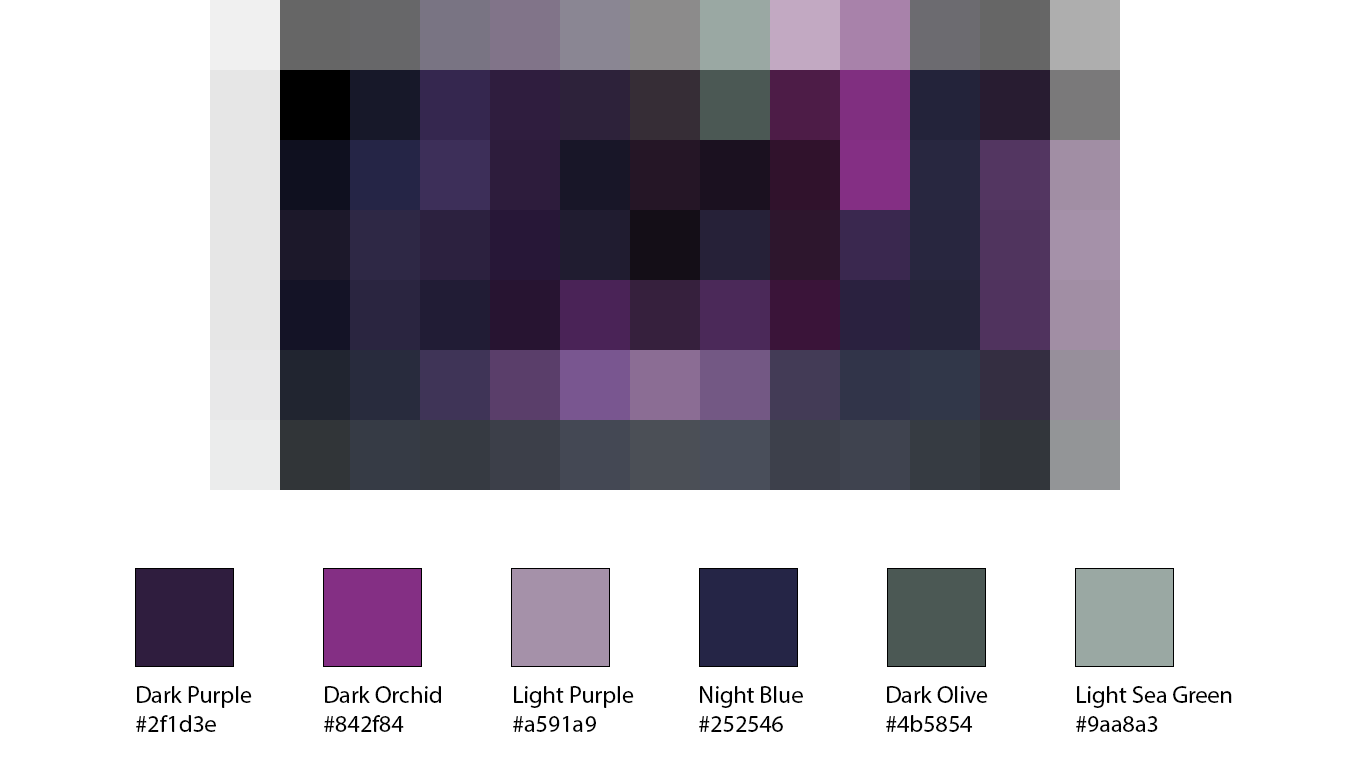
<style>
.page{position:relative;width:1366px;height:768px;background:#ffffff}
.page>*{position:absolute;margin:0}
.t1{font:24px "MyriadPro-Regular";color:#000000}
</style>
<div class="page">
<p class="t1" style="left:136px;top:686px;width:116px;height:46px">Dark Purple<br>#2f1d3e</p>
<p class="t1" style="left:324px;top:686px;width:117px;height:46px">Dark Orchid<br>#842f84</p>
<p class="t1" style="left:513px;top:686px;width:121px;height:46px">Light Purple<br>#a591a9</p>
<p class="t1" style="left:699px;top:686px;width:104px;height:46px">Night Blue<br>#252546</p>
<p class="t1" style="left:886px;top:686px;width:102px;height:46px">Dark Olive<br>#4b5854</p>
<p class="t1" style="left:1076px;top:686px;width:156px;height:46px">Light Sea Green<br>#9aa8a3</p>
</div>
